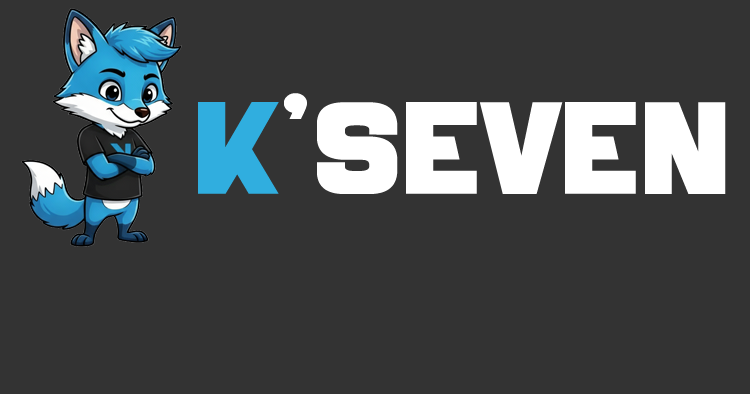
<style>
.page{position:relative;width:750px;height:394px;background:#333333}
.page>*{position:absolute;margin:0}
.t1{font:125.5px "BabellBold";color:#ffffff;scale:1.17 1}
.t2{font:125.5px "BabellBold";color:#30aedf;scale:1.17 1}
</style>
<div class="page">
<p class="t1" style="left:198px;top:93px;width:528px;height:101px"><span class="t2">K</span>’Seven</p>
</div>
